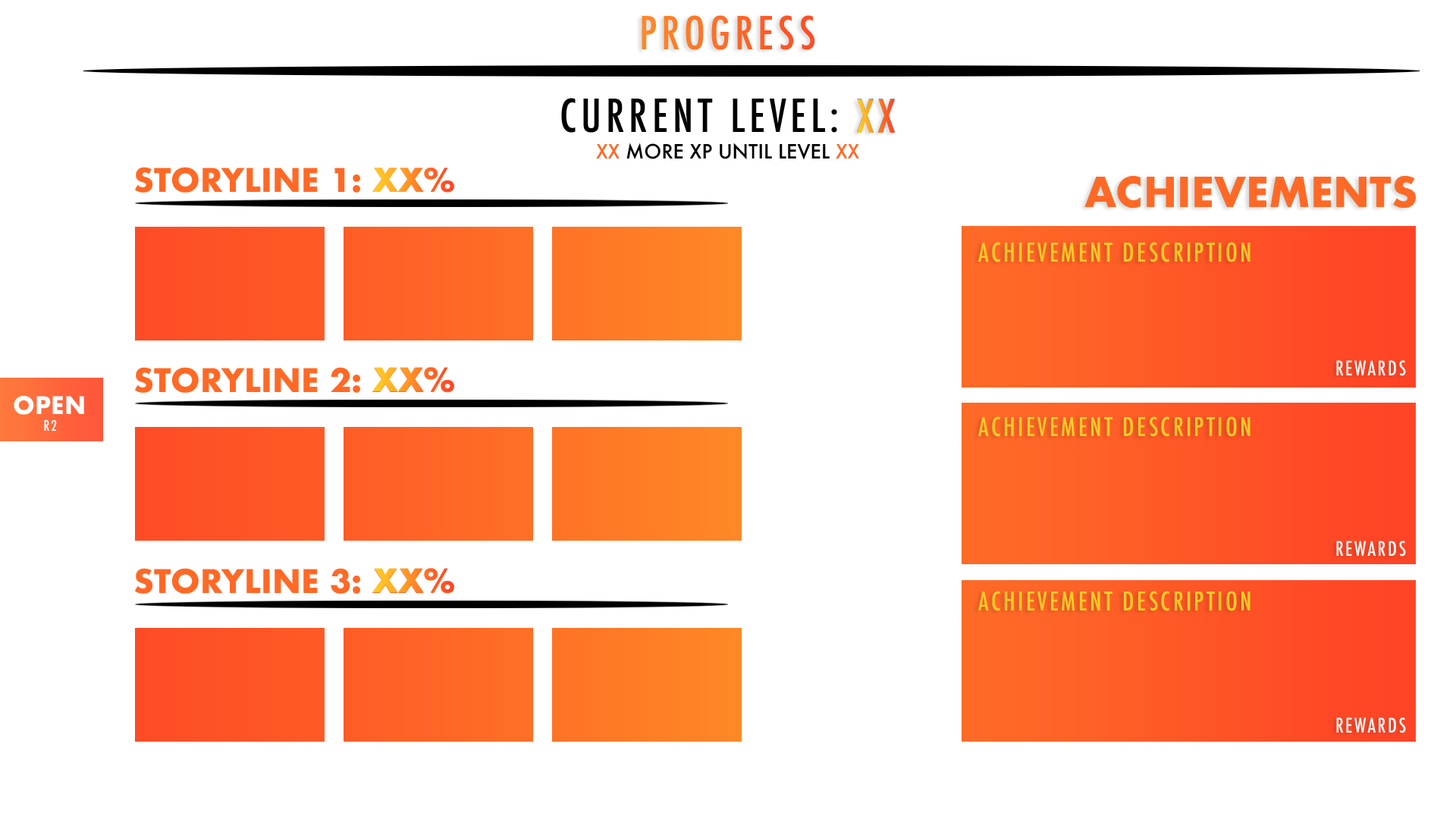
<style>
.page{position:relative;width:1456px;height:819px;background:#ffffff}
.page>*{position:absolute;margin:0}
.t1{font:44.2px "Futura-CondensedMedium";letter-spacing:0.1em}
.t2{font:44.2px "Futura-CondensedMedium";letter-spacing:0.1em;color:#000000}
.t3{font:44.2px "Futura-CondensedMedium";letter-spacing:0.1em;color:#939598}
.t4{font:19.2px "Futura-Medium";color:#000000}
.t5{font:19.2px "Futura-Medium";color:#ff6926}
.t6{font:19.2px "Futura-Medium";color:#ff6a27}
.t7{font:31.6px "Futura-Bold";color:#ff6926}
.t8{font:31.6px "Futura-Bold"}
.t9{font:40.1px "Futura-Bold";color:#ff6926}
.t10{font:25.3px "Futura-CondensedMedium";letter-spacing:0.1em;color:#ffca27}
.t11{font:19.5px "Futura-CondensedMedium";letter-spacing:0.1em;color:#ffffff}
.t12{font:23.6px "Futura-Bold";color:#ffffff}
.t13{font:14.1px "Futura-CondensedMedium";letter-spacing:0.1em;color:#ffffff}
</style>
<div class="page">
<p class="t1" style="left:642px;top:15px;width:173px;height:35px">PROGRESS</p>
<p class="t2" style="left:561px;top:98px;width:334px;height:35px">CURRENT LEVEL: <span class="t3">XX</span></p>
<p class="t1" style="left:857px;top:99px;width:38px;height:34px">XX</p>
<p class="t4" style="left:596px;top:143px;width:263px;height:17px"><span class="t5">XX</span> MORE XP UNTIL LEVEL <span class="t6">XX</span></p>
<p class="t7" style="left:135px;top:167px;width:319px;height:26px">STORYLINE 1: XX%</p>
<p class="t8" style="left:372px;top:168px;width:82px;height:25px">XX%</p>
<p class="t9" style="left:1084px;top:176px;width:332px;height:32px">ACHIEVEMENTS</p>
<p class="t10" style="left:978px;top:242px;width:272px;height:20px">ACHIEVEMENT DESCRIPTION</p>
<p class="t11" style="left:1336px;top:360px;width:70px;height:16px">REWARDS</p>
<p class="t7" style="left:135px;top:367px;width:319px;height:26px">STORYLINE 2: XX%</p>
<p class="t8" style="left:372px;top:367px;width:82px;height:25px">XX%</p>
<p class="t12" style="left:14px;top:396px;width:70px;height:19px">OPEN</p>
<p class="t13" style="left:44px;top:419px;width:13px;height:12px">R2</p>
<p class="t10" style="left:978px;top:416px;width:272px;height:21px">ACHIEVEMENT DESCRIPTION</p>
<p class="t11" style="left:1336px;top:541px;width:70px;height:16px">REWARDS</p>
<p class="t7" style="left:135px;top:568px;width:319px;height:26px">STORYLINE 3: XX%</p>
<p class="t8" style="left:372px;top:568px;width:82px;height:25px">XX%</p>
<p class="t10" style="left:978px;top:591px;width:272px;height:20px">ACHIEVEMENT DESCRIPTION</p>
<p class="t11" style="left:1336px;top:717px;width:70px;height:16px">REWARDS</p>
</div>
